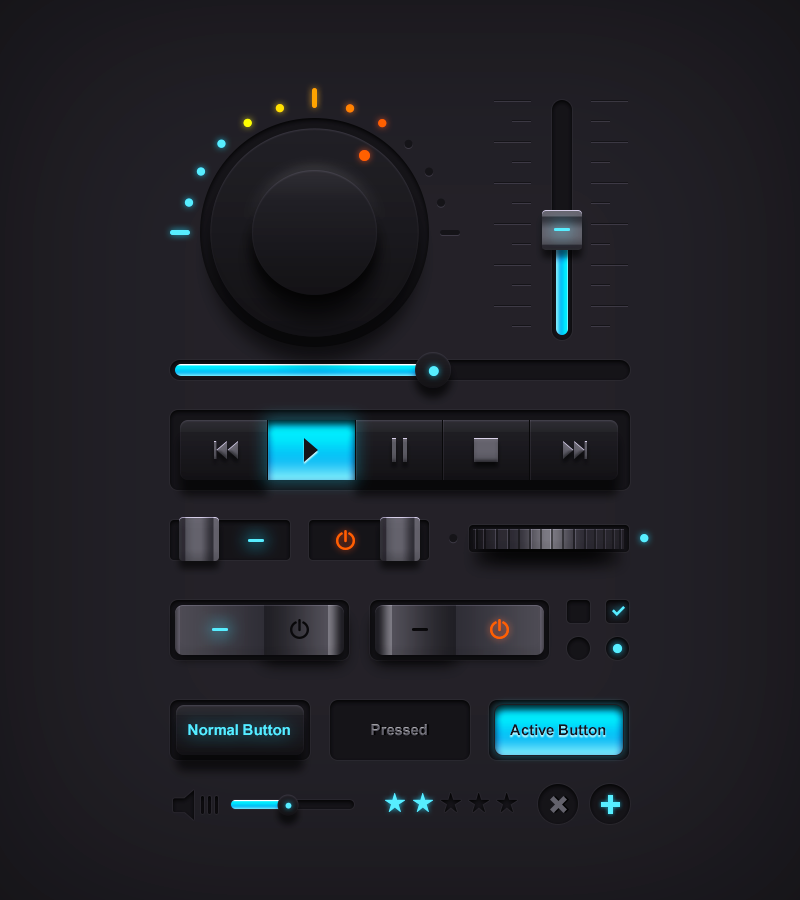
<style>
.page{position:relative;width:800px;height:900px}
.page>*{position:absolute;margin:0}
.t1{font:15px "Arial-BoldMT";color:#4cddff}
.t2{font:15px "Arial-BoldMT";color:#62616b}
.t3{font:15px "Arial-BoldMT";color:#151418}
</style>
<div class="page">
<p class="t1" style="left:188px;top:724px;width:102px;height:12px">Normal Button</p>
<p class="t2" style="left:371px;top:724px;width:56px;height:12px">Pressed</p>
<p class="t3" style="left:510px;top:724px;width:96px;height:12px">Active Button</p>
</div>
